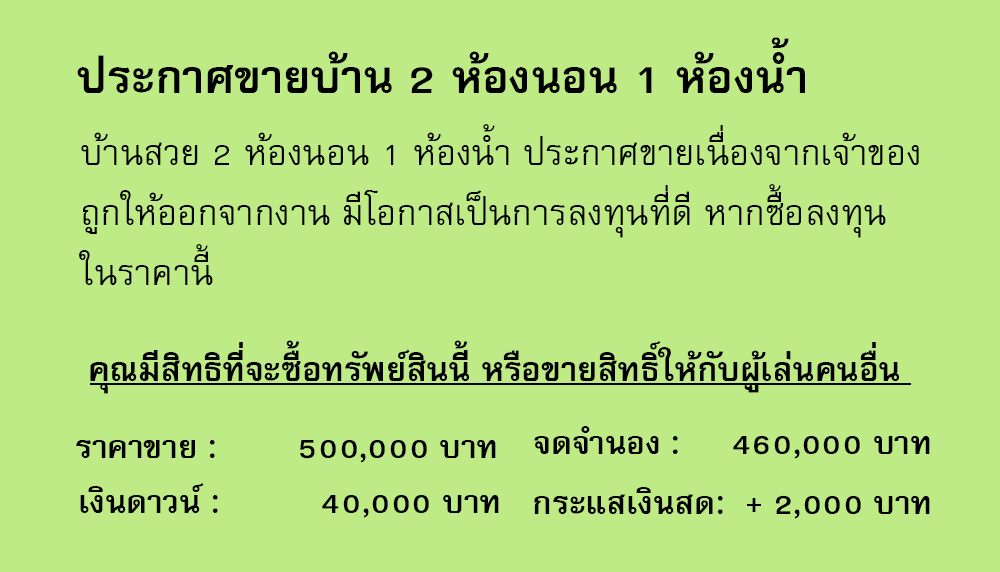
<style>
.page{position:relative;width:1000px;height:572px;background:#beeb85}
.page>*{position:absolute;margin:0}
.t1{font:64px "FreesiaUPCBold";color:#000000}
.t2{font:50px/60px "FreesiaUPC";color:#000000}
.t3{font:47px "FreesiaUPCBold";color:#000000}
.t4{font:45px "FreesiaUPCBold";color:#000000}
</style>
<div class="page">
<p class="t1" style="left:77px;top:37px;width:728px;height:56px">ประกาศขายบ้าน 2 ห้องนอน 1 ห้องน้ำ</p>
<p class="t2" style="left:79px;top:124px;width:840px;height:161px">บ้านสวย 2 ห้องนอน 1 ห้องน้ำ ประกาศขายเนื่องจากเจ้าของ<br>ถูกให้ออกจากงาน มีโอกาสเป็นการลงทุนที่ดี หากซื้อลงทุน<br>ในราคานี้</p>
<p class="t3" style="left:90px;top:340px;width:810px;height:54px">คุณมีสิทธิที่จะซื้อทรัพย์สินนี้ หรือขายสิทธิ์ให้กับผู้เล่นคนอื่น</p>
<p class="t4" style="left:534px;top:426px;width:396px;height:33px">จดจำนอง :     460,000 บาท</p>
<p class="t4" style="left:76px;top:440px;width:420px;height:23px">ราคาขาย :        500,000 บาท</p>
<p class="t4" style="left:80px;top:482px;width:419px;height:36px">เงินดาวน์ :          40,000 บาท</p>
<p class="t4" style="left:534px;top:487px;width:396px;height:32px">กระแสเงินสด:  + 2,000 บาท</p>
</div>
